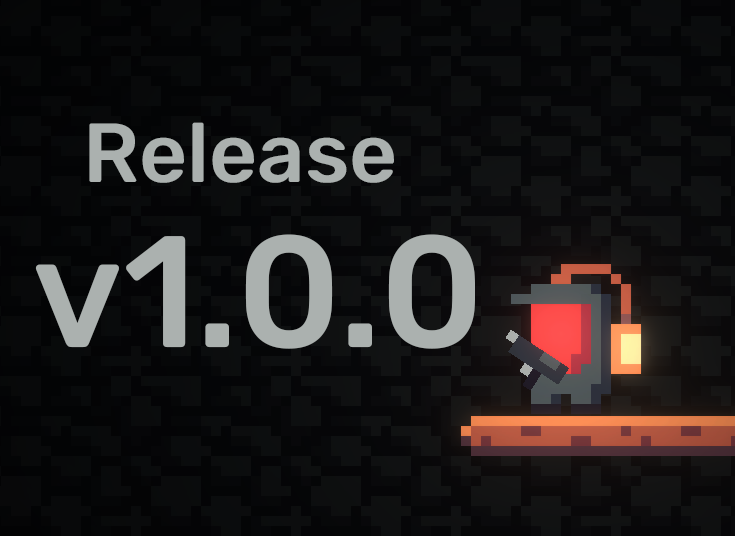
<style>
.page{position:relative;width:735px;height:536px}
.page>*{position:absolute;margin:0}
.t1{font:83.6px "Rubik-Medium";color:#abb1af}
.t2{font:158.3px "Rubik-Medium";color:#abb1af}
</style>
<div class="page">
<p class="t1" style="left:89px;top:122px;width:305px;height:61px">Release</p>
<p class="t2" style="left:35px;top:234px;width:440px;height:115px">v1.0.0</p>
</div>
